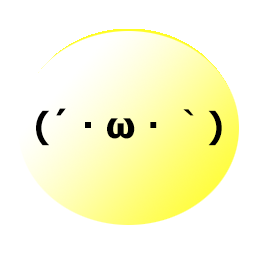
<style>
.page{position:relative;width:256px;height:256px;background:#ffffff}
.page>*{position:absolute;margin:0}
.t1{font:36px "Tahoma-Bold";color:#000000}
.t2{font:36px "MS-Gothic";color:#000000}
</style>
<div class="page">
<p class="t1" style="left:36px;top:108px;width:186px;height:38px">(´<span class="t2">・</span>ω<span class="t2">・｀</span>)</p>
</div>
